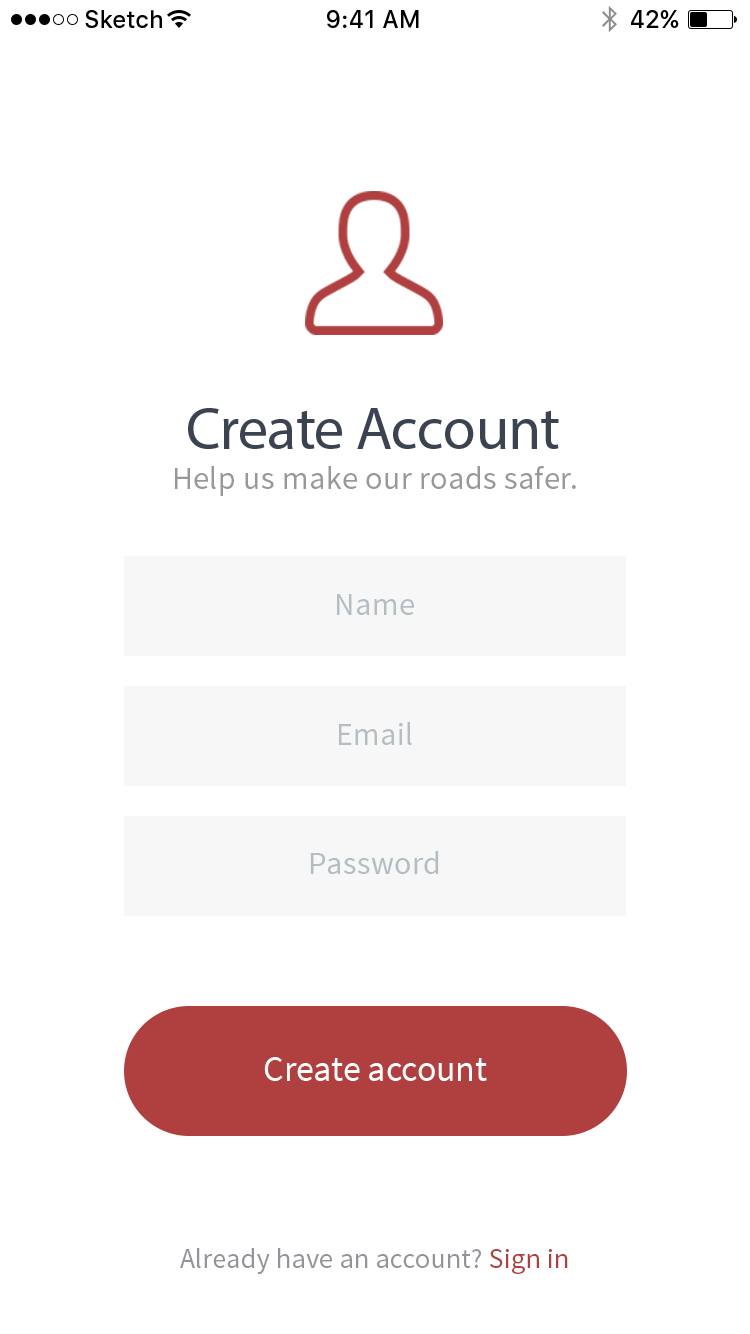
<style>
.page{position:relative;width:750px;height:1334px;background:#ffffff}
.page>*{position:absolute;margin:0}
.t1{font:24px "SFUIText-Medium";color:#000000}
.t2{font:32px "SourceSansPro-Regular";letter-spacing:0.015em;color:#b3bdc2}
.t3{font:36px "SourceSansPro-Regular";letter-spacing:-0.005em;color:#ffffff}
.t4{font:28px "SourceSansPro-Regular";letter-spacing:0.01em;color:#919499}
.t5{font:28px "SourceSansPro-Regular";letter-spacing:0.01em;color:#b04040}
</style>
<div class="page">
<p class="t1" style="left:85px;top:10px;width:77px;height:18px">Sketch</p>
<p class="t1" style="left:327px;top:10px;width:92px;height:18px">9:41 AM</p>
<p class="t1" style="left:631px;top:10px;width:48px;height:18px">42%</p>
<p class="t2" style="left:337px;top:594px;width:77px;height:21px">Name</p>
<p class="t2" style="left:339px;top:722px;width:73px;height:23px">Email</p>
<p class="t2" style="left:310px;top:851px;width:129px;height:23px">Password</p>
<p class="t3" style="left:264px;top:1057px;width:223px;height:24px">Create account</p>
<p class="t4" style="left:180px;top:1248px;width:388px;height:26px">Already have an account? <span class="t5">Sign in</span></p>
</div>
